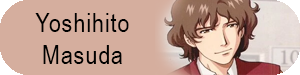
<style>
.page{position:relative;width:300px;height:75px;background:#d5ae9e}
.page>*{position:absolute;margin:0}
.t1{font:26px "ArialNarrow";letter-spacing:0.04em;color:#000000}
</style>
<div class="page">
<p class="t1" style="left:35px;top:13px;width:94px;height:51px;text-align:center">Yoshihito<br>Masuda</p>
</div>
